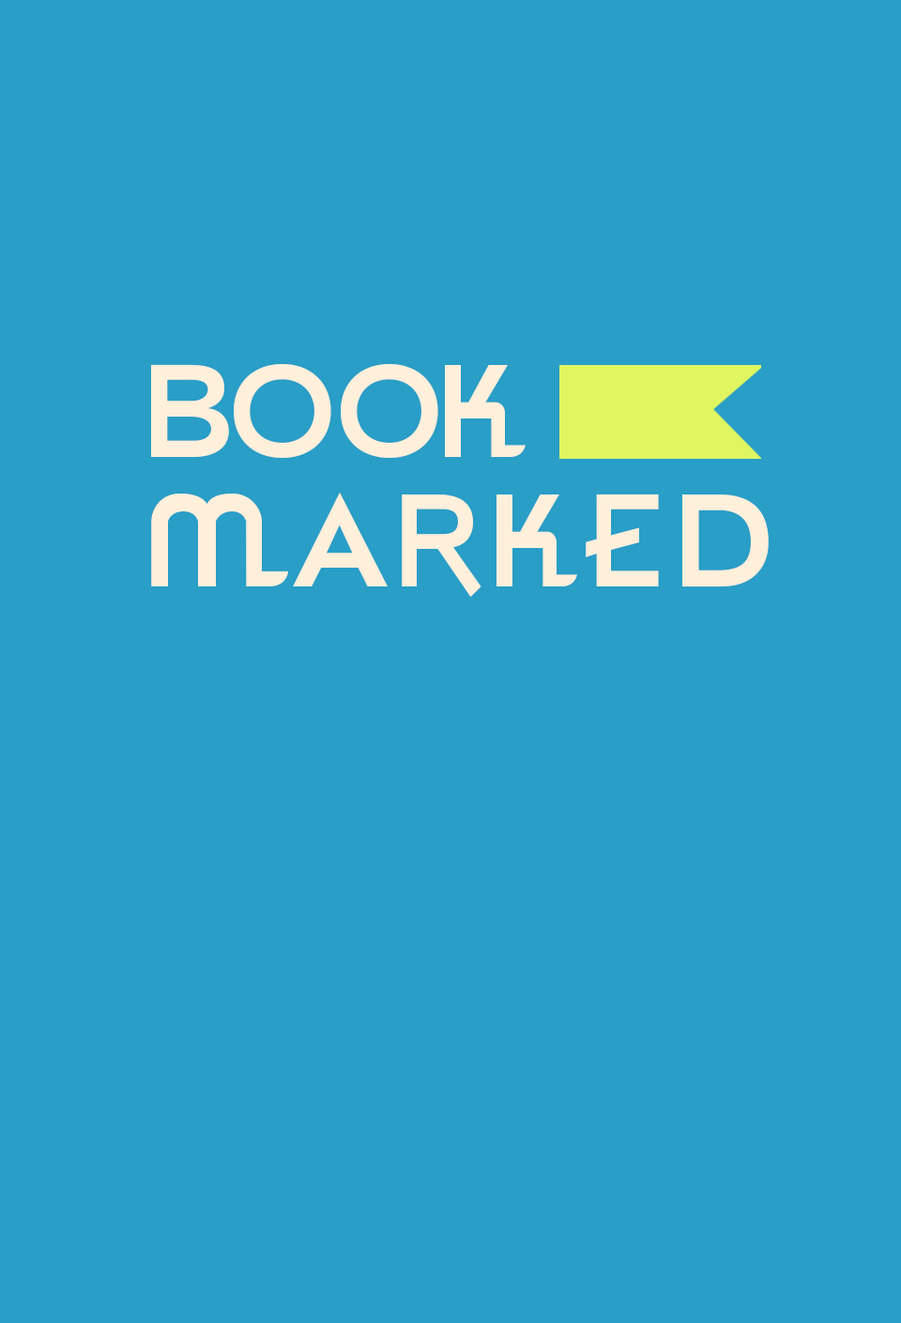
<style>
.page{position:relative;width:901px;height:1323px;background:#299ec7}
.page>*{position:absolute;margin:0}
.t1{font:13.3px/129.6px "ParkwayMotel";letter-spacing:0.06em;color:#fff0dc}
.t2{font:13.3px "ParkwayMotel";letter-spacing:-0.06em;color:#fff0dc}
.t3{font:13.3px "ParkwayMotel";letter-spacing:-0.02em;color:#fff0dc}
.t4{font:13.3px "ParkwayMotel";letter-spacing:0.06em;color:#fff0dc}
</style>
<div class="page">
<p class="t1" style="left:151px;top:364px;width:618px;height:233px"><span class="t2">B</span><span class="t3">O</span><span class="t2">O</span><span class="t4">K<br></span>MARKED</p>
</div>
